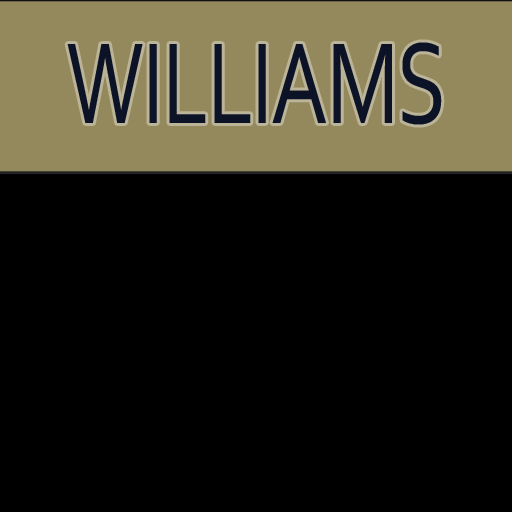
<style>
.page{position:relative;width:512px;height:512px;background:#000000}
.page>*{position:absolute;margin:0}
.t1{font:121px "Corbel";letter-spacing:-0.02em;color:#0d1327;scale:0.73 1}
</style>
<div class="page">
<p class="t1" style="left:67px;top:42px;width:375px;height:83px">WILLIAMS</p>
</div>
